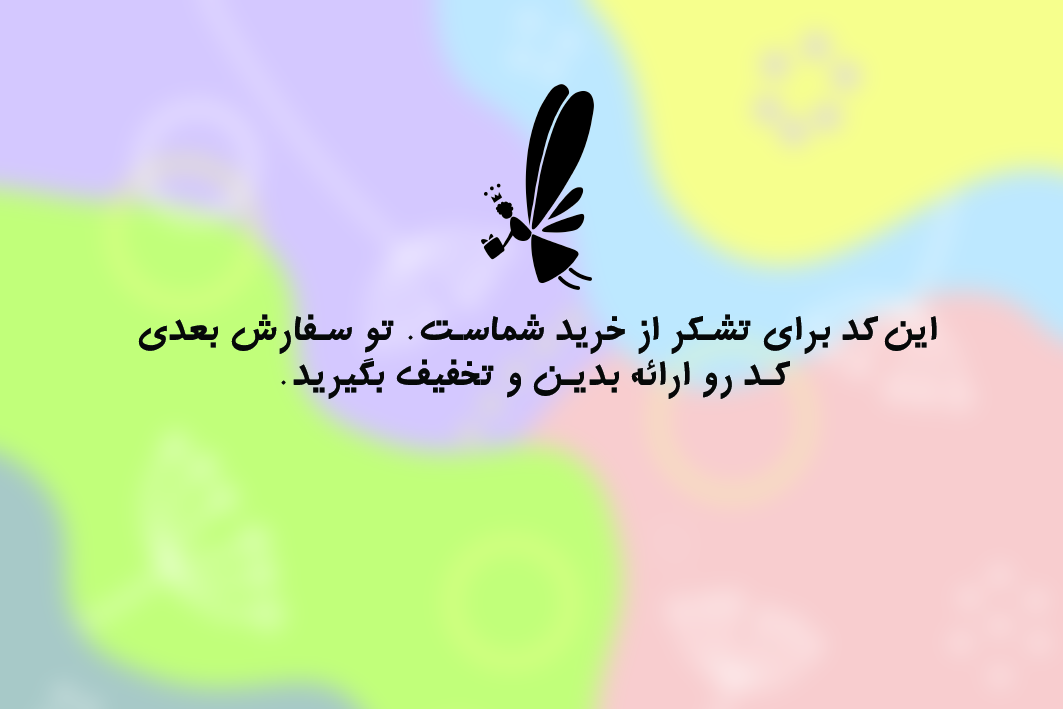
<style>
.page{position:relative;width:1063px;height:709px}
.page>*{position:absolute;margin:0}
.t1{font:37.5px "Wmehr";letter-spacing:0.025em;color:#060808}
</style>
<div class="page">
<p class="t1" style="left:138px;top:314px;width:799px;height:85px;text-align:center">این کد برای تشکر از خرید شماست. تو سفارش بعدی <br>کد رو ارائه بدین و تخفیف بگیرید.</p>
</div>
